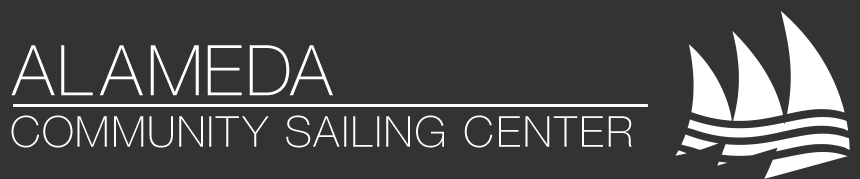
<style>
.page{position:relative;width:860px;height:179px;background:#333333}
.page>*{position:absolute;margin:0}
.t1{font:42.8px "HelveticaNeueLTStd-Th";letter-spacing:0.06em;color:#ffffff}
.t2{font:70.1px "HelveticaNeueLTStd-Th";letter-spacing:0.06em;color:#ffffff}
</style>
<div class="page">
<p class="t1" style="left:11px;top:45px;width:621px;height:103px"><span class="t2">ALAMEDA<br></span>COMMUNITY SAILING CENTER</p>
</div>
